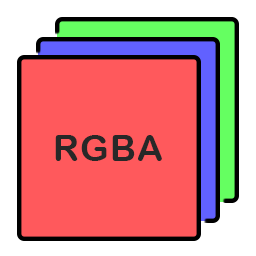
<style>
.page{position:relative;width:256px;height:256px;background:#ff595c}
.page>*{position:absolute;margin:0}
.t1{font:36px "ArialRoundedMTBold";letter-spacing:0.05em;color:#282828;text-transform:uppercase}
</style>
<div class="page">
<p class="t1" style="left:55px;top:135px;width:107px;height:26px">RGBA</p>
</div>
